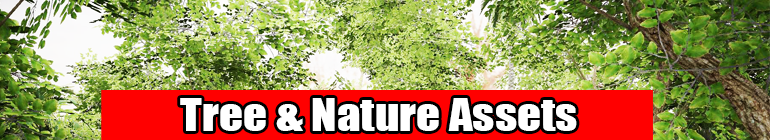
<style>
.page{position:relative;width:770px;height:140px}
.page>*{position:absolute;margin:0}
.t1{font:41.8px "Impact";color:#ffffff;scale:1.13 1}
</style>
<div class="page">
<p class="t1" style="left:180px;top:98px;width:397px;height:33px">Tree &amp; Nature Assets</p>
</div>
